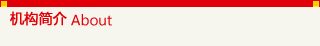
<style>
.page{position:relative;width:320px;height:46px;background:#f6f6ee}
.page>*{position:absolute;margin:0}
.t1{font:14px "MicrosoftYaHei";color:#e20008;text-transform:uppercase;font-weight:bold}
.t2{font:14px "MicrosoftYaHei";color:#e20008}
</style>
<div class="page">
<p class="t1" style="left:10px;top:11px;width:57px;height:15px">机构简介</p>
<p class="t2" style="left:71px;top:14px;width:41px;height:12px">About</p>
</div>
